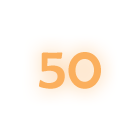
<style>
.page{position:relative;width:140px;height:140px;background:#ffffff}
.page>*{position:absolute;margin:0}
.t1{font:60px "BerlinSansFB-Reg";color:#fbaf5d}
</style>
<div class="page">
<p class="t1" style="left:39px;top:52px;width:62px;height:37px">50</p>
</div>
